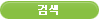
<style>
.page{position:relative;width:100px;height:20px;background:#88c042}
.page>*{position:absolute;margin:0}
.t1{font:12px "morris9";color:#ffffff;font-weight:bold}
</style>
<div class="page">
<p class="t1" style="left:38px;top:5px;width:20px;height:10px">검색</p>
</div>
